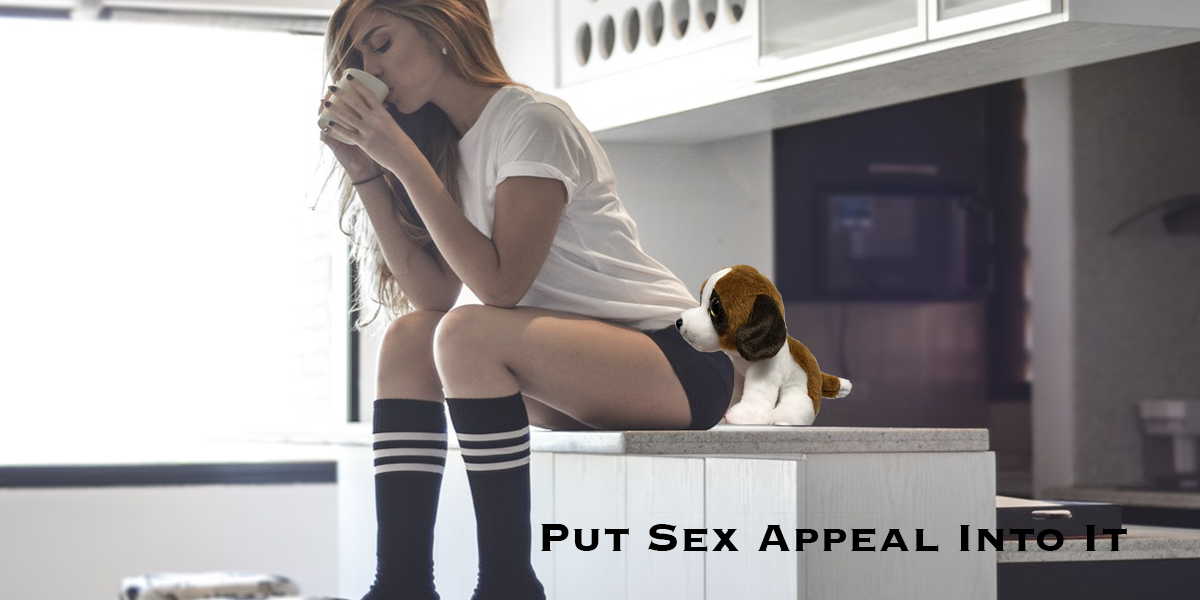
<style>
.page{position:relative;width:1200px;height:600px;background:#ffffff}
.page>*{position:absolute;margin:0}
.t1{font:50px "Copperplate-Bold";color:#000000}
</style>
<div class="page">
<p class="t1" style="left:541px;top:524px;width:586px;height:28px">Put Sex Appeal Into It</p>
</div>
